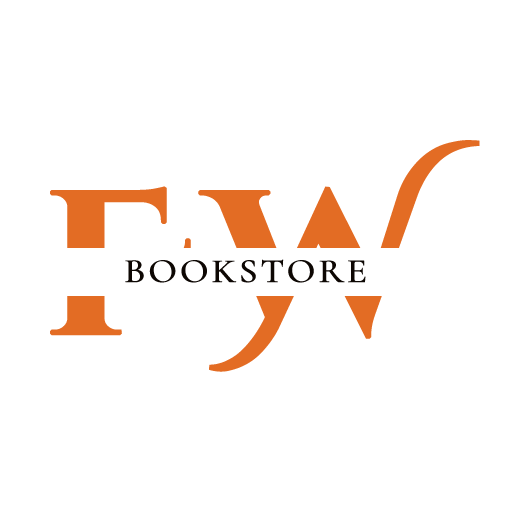
<style>
.page{position:relative;width:512px;height:512px;background:#ffffff}
.page>*{position:absolute;margin:0}
.t1{font:33.8px "CormorantSC-Medium";letter-spacing:0.05em;color:#0d0703;font-weight:bold;scale:1.11 1}
</style>
<div class="page">
<p class="t1" style="left:125px;top:259px;width:241px;height:24px">BOOKSTORE</p>
</div>
